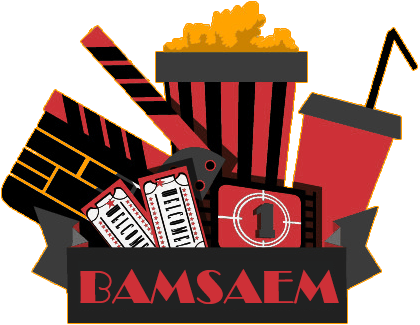
<style>
.page{position:relative;width:420px;height:325px;background:#ffffff}
.page>*{position:absolute;margin:0}
.t1{font:48px "Broadway";color:#ce3037}
</style>
<div class="page">
<p class="t1" style="left:80px;top:269px;width:259px;height:35px">BAMSAEM</p>
</div>
